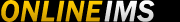
<style>
.page{position:relative;width:180px;height:22px;background:#000000}
.page>*{position:absolute;margin:0}
.t1{font:30px "FranklinGothic-MediumItalic";color:#e5b200;font-weight:bold}
.t2{font:30px "FranklinGothic-MediumItalic";color:#e8e8e8;font-weight:bold}
</style>
<div class="page">
<p class="t1" style="left:1px;top:0px;width:102px;height:22px">ONLINE</p>
<p class="t2" style="left:104px;top:0px;width:51px;height:22px">IMS</p>
</div>
